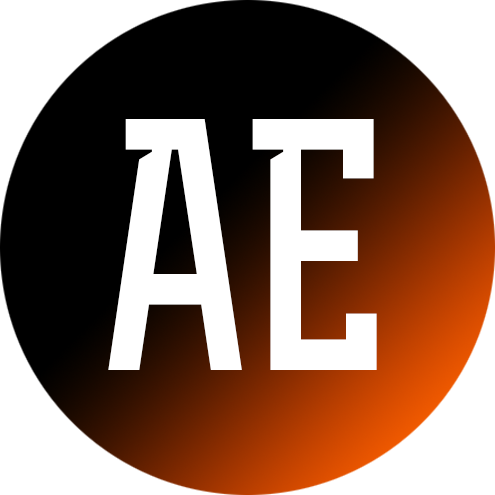
<style>
.page{position:relative;width:495px;height:495px;background:#ffffff}
.page>*{position:absolute;margin:0}
.t1{font:335.1px "RexBold";letter-spacing:-0.025em;color:#ffffff}
</style>
<div class="page">
<p class="t1" style="left:108px;top:119px;width:269px;height:251px">AE</p>
</div>
